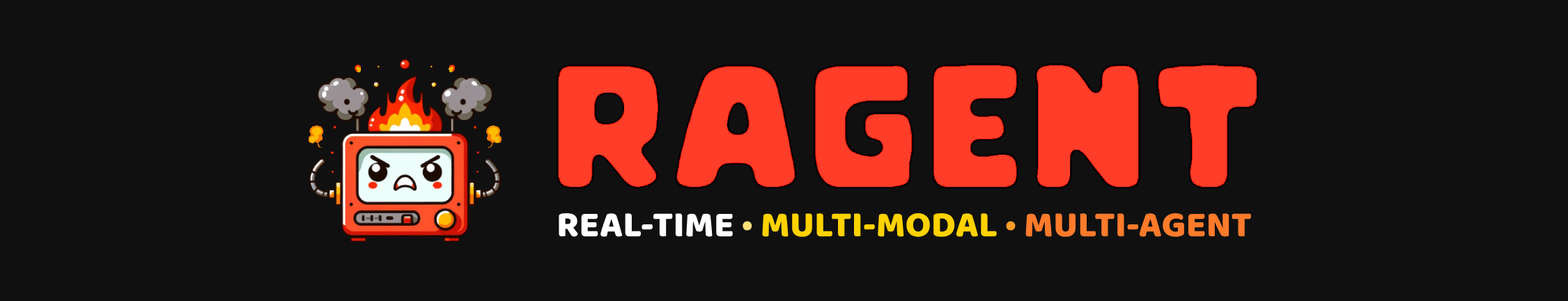
<style>
.page{position:relative;width:1568px;height:301px;background:#101010}
.page>*{position:absolute;margin:0}
.t1{font:36.9px "Baloo";color:#ffd201}
.t2{font:36.9px "Baloo";color:#ffffff}
.t3{font:36.9px "Baloo";color:#ffe17b}
.t4{font:36.9px "Baloo";color:#ff9e2b}
.t5{font:36.9px "Baloo";color:#ff7b2b}
</style>
<div class="page">
<p class="t1" style="left:559px;top:212px;width:692px;height:25px"><span class="t2">REAL-TIME </span><span class="t3">• </span>MULTI-MODAL <span class="t4">• </span><span class="t5">MULTI-AGENT</span></p>
</div>
